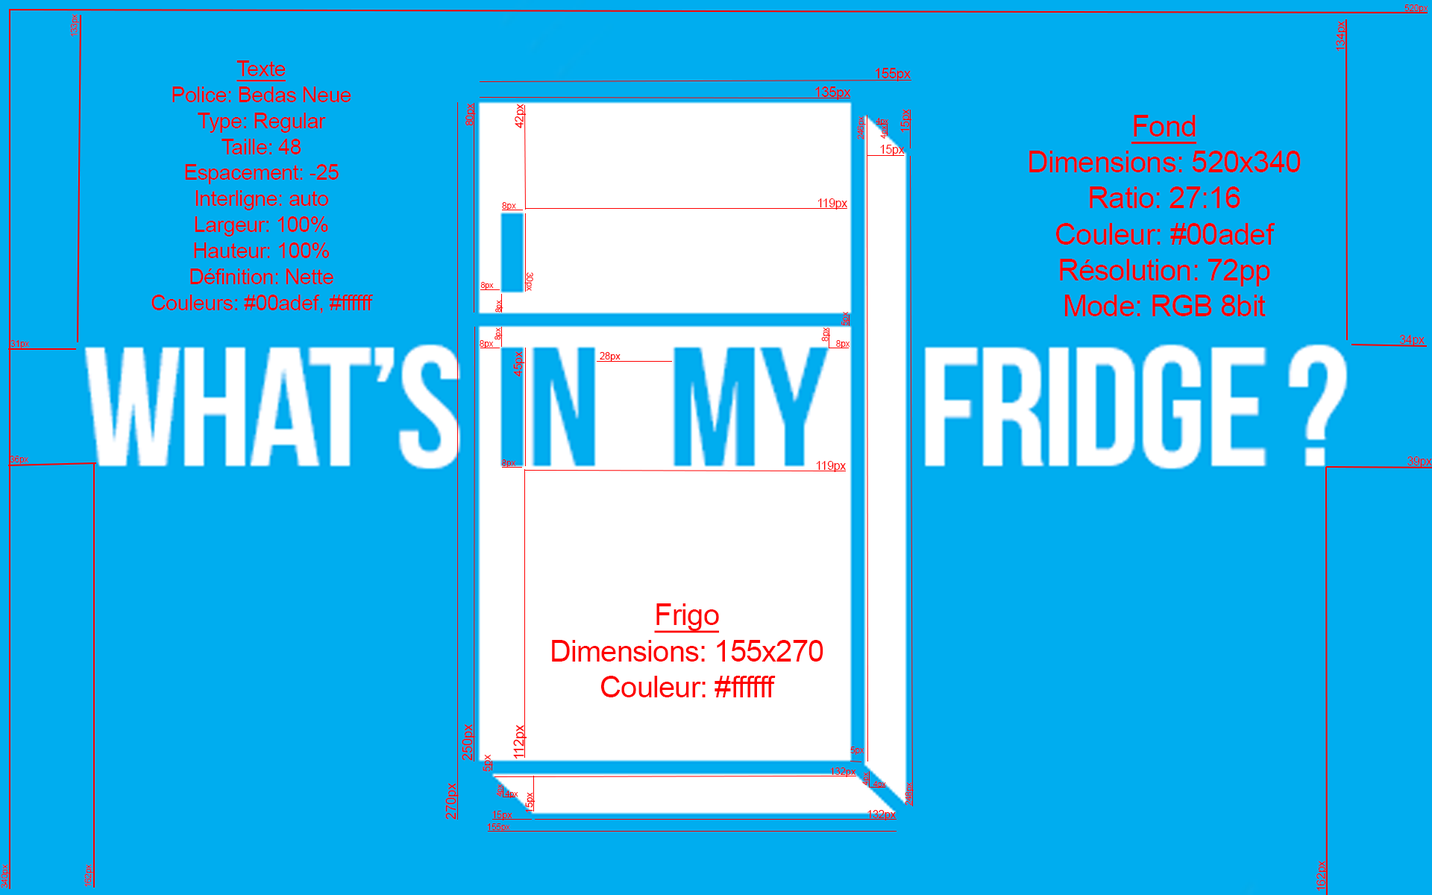
<style>
.page{position:relative;width:1432px;height:895px;background:#00adef}
.page>*{position:absolute;margin:0}
.t1{font:9px "ArialMT";letter-spacing:-0.025em;color:#ff0000}
.t2{font:8.9px "ArialMT";letter-spacing:-0.025em;color:#ff0000}
.t3{font:21.7px "ArialMT";letter-spacing:-0.025em;color:#fe0000}
.t4{font:21.7px "ArialMT";letter-spacing:-0.025em;color:#fe0000;text-decoration:underline}
.t5{font:14px "ArialMT";letter-spacing:-0.025em;color:#fe0000}
.t6{font:10.9px "ArialMT";letter-spacing:-0.025em;color:#fe0000}
.t7{font:12.1px "ArialMT";letter-spacing:-0.025em;color:#fe0000}
.t8{font:9px "ArialMT";letter-spacing:-0.025em;color:#fe0000}
.t9{font:8px "ArialMT";letter-spacing:-0.025em;color:#ff0000}
.t10{font:8.2px "ArialMT";letter-spacing:-0.025em;color:#ff0000}
.t11{font:30px "ArialMT";letter-spacing:-0.025em;color:#fe0000}
.t12{font:30px "ArialMT";letter-spacing:-0.025em;color:#fe0000;text-decoration:underline}
.t13{font:12px "ArialMT";letter-spacing:-0.025em;color:#fe0000}
.t14{font:9.1px "ArialMT";letter-spacing:-0.025em;color:#ff0000}
.t15{font:10px "ArialMT";letter-spacing:-0.025em;color:#fe0000}
.t16{font:12px "ArialMT";letter-spacing:-0.025em;color:#ff0000}
.t17{font:14.1px "ArialMT";letter-spacing:-0.025em;color:#fe0000}
.t18{font:11px "ArialMT";letter-spacing:-0.025em;color:#fe0000}
.t19{font:8px "ArialMT";letter-spacing:-0.025em;color:#f60000}
.t20{font:8px "ArialMT";letter-spacing:-0.025em}
.t21{font:9.1px "ArialMT";letter-spacing:-0.025em;color:#fe0000}
.t22{font:11.1px "ArialMT";letter-spacing:-0.025em;color:#fe0000}
</style>
<div class="page">
<p class="t1" style="left:1405px;top:4px;width:24px;height:9px">520px</p>
<p class="t1" style="left:70px;top:14px;width:10px;height:23px;rotate:-90deg">133px</p>
<p class="t2" style="left:1336px;top:21px;width:12px;height:30px;rotate:-90deg">134px</p>
<p class="t3" style="left:151px;top:60px;width:222px;height:253px;text-align:center"><span class="t4">Texte<br></span>Police: Bedas Neue<br>Type: Regular<br>Taille: 48<br>Espacement: -25<br>Interligne: auto<br>Largeur: 100%<br>Hauteur: 100%<br>Définition: Nette <br>Couleurs: #00adef, #ffffff</p>
<p class="t5" style="left:875px;top:68px;width:36px;height:13px">155px</p>
<p class="t5" style="left:815px;top:87px;width:36px;height:13px">135px</p>
<p class="t6" style="left:465px;top:103px;width:11px;height:23px;rotate:-90deg">80px</p>
<p class="t2" style="left:515px;top:104px;width:12px;height:24px;rotate:-90deg">42px</p>
<p class="t7" style="left:900px;top:109px;width:12px;height:24px;rotate:-90deg">15px</p>
<p class="t8" style="left:857px;top:116px;width:9px;height:23px;rotate:-90deg">246px</p>
<p class="t9" style="left:876px;top:118px;width:13px;height:7px">4px</p>
<p class="t10" style="left:880px;top:125px;width:8px;height:14px;rotate:-90deg">4px</p>
<p class="t11" style="left:1029px;top:115px;width:272px;height:201px;text-align:center"><span class="t12">Fond<br></span>Dimensions: 520x340<br>Ratio: 27:16<br>Couleur: #00adef<br>Résolution: 72pp<br>Mode: RGB 8bit</p>
<p class="t13" style="left:880px;top:145px;width:25px;height:11px">15px</p>
<p class="t1" style="left:502px;top:202px;width:14px;height:8px">8px</p>
<p class="t1" style="left:818px;top:198px;width:29px;height:12px">119px</p>
<p class="t9" style="left:480px;top:282px;width:14px;height:7px">8px</p>
<p class="t1" style="left:524px;top:272px;width:9px;height:19px;rotate:90deg">30px</p>
<p class="t9" style="left:495px;top:300px;width:9px;height:13px;rotate:-90deg">8px</p>
<p class="t1" style="left:841px;top:312px;width:9px;height:14px;rotate:-90deg">5px</p>
<p class="t9" style="left:495px;top:327px;width:8px;height:13px;rotate:-90deg">8px</p>
<p class="t14" style="left:821px;top:327px;width:10px;height:15px;rotate:-90deg">8px</p>
<p class="t1" style="left:10px;top:340px;width:19px;height:8px">31px</p>
<p class="t1" style="left:480px;top:340px;width:14px;height:8px">8px</p>
<p class="t1" style="left:836px;top:340px;width:14px;height:8px">8px</p>
<p class="t1" style="left:1400px;top:335px;width:25px;height:11px">34px</p>
<p class="t1" style="left:513px;top:351px;width:12px;height:26px;rotate:-90deg">45px</p>
<p class="t15" style="left:600px;top:352px;width:21px;height:10px">28px</p>
<p class="t1" style="left:10px;top:456px;width:18px;height:8px">36px</p>
<p class="t1" style="left:501px;top:460px;width:15px;height:8px">8px</p>
<p class="t1" style="left:816px;top:461px;width:30px;height:11px">119px</p>
<p class="t16" style="left:1408px;top:457px;width:24px;height:11px">39px</p>
<p class="t11" style="left:552px;top:603px;width:272px;height:94px;text-align:center"><span class="t12">Frigo<br></span>Dimensions: 155x270<br>Couleur: #ffffff</p>
<p class="t5" style="left:462px;top:724px;width:13px;height:37px;rotate:-90deg">250px</p>
<p class="t17" style="left:513px;top:725px;width:14px;height:34px;rotate:-90deg">112px</p>
<p class="t8" style="left:850px;top:747px;width:15px;height:8px">5px</p>
<p class="t18" style="left:483px;top:754px;width:10px;height:18px;rotate:-90deg">5px</p>
<p class="t15" style="left:830px;top:768px;width:26px;height:9px">132px</p>
<p class="t19" style="left:862px;top:772px;width:9px;height:13px;rotate:-90deg">4px</p>
<p class="t5" style="left:445px;top:783px;width:14px;height:37px;rotate:-90deg">270px</p>
<p class="t20" style="left:496px;top:784px;width:8px;height:13px;rotate:-90deg">4px</p>
<p class="t19" style="left:874px;top:781px;width:12px;height:7px">4px</p>
<p class="t21" style="left:905px;top:783px;width:10px;height:23px;rotate:-90deg">248px</p>
<p class="t9" style="left:505px;top:791px;width:13px;height:7px">4px</p>
<p class="t15" style="left:525px;top:792px;width:11px;height:21px;rotate:-90deg">15px</p>
<p class="t15" style="left:492px;top:811px;width:20px;height:10px">15px</p>
<p class="t22" style="left:868px;top:810px;width:29px;height:11px">132px</p>
<p class="t8" style="left:487px;top:824px;width:23px;height:8px">155px</p>
<p class="t1" style="left:1px;top:865px;width:9px;height:23px;rotate:-90deg">340px</p>
<p class="t2" style="left:84px;top:865px;width:9px;height:22px;rotate:-90deg">162px</p>
<p class="t2" style="left:1317px;top:861px;width:12px;height:30px;rotate:-90deg">162px</p>
</div>
